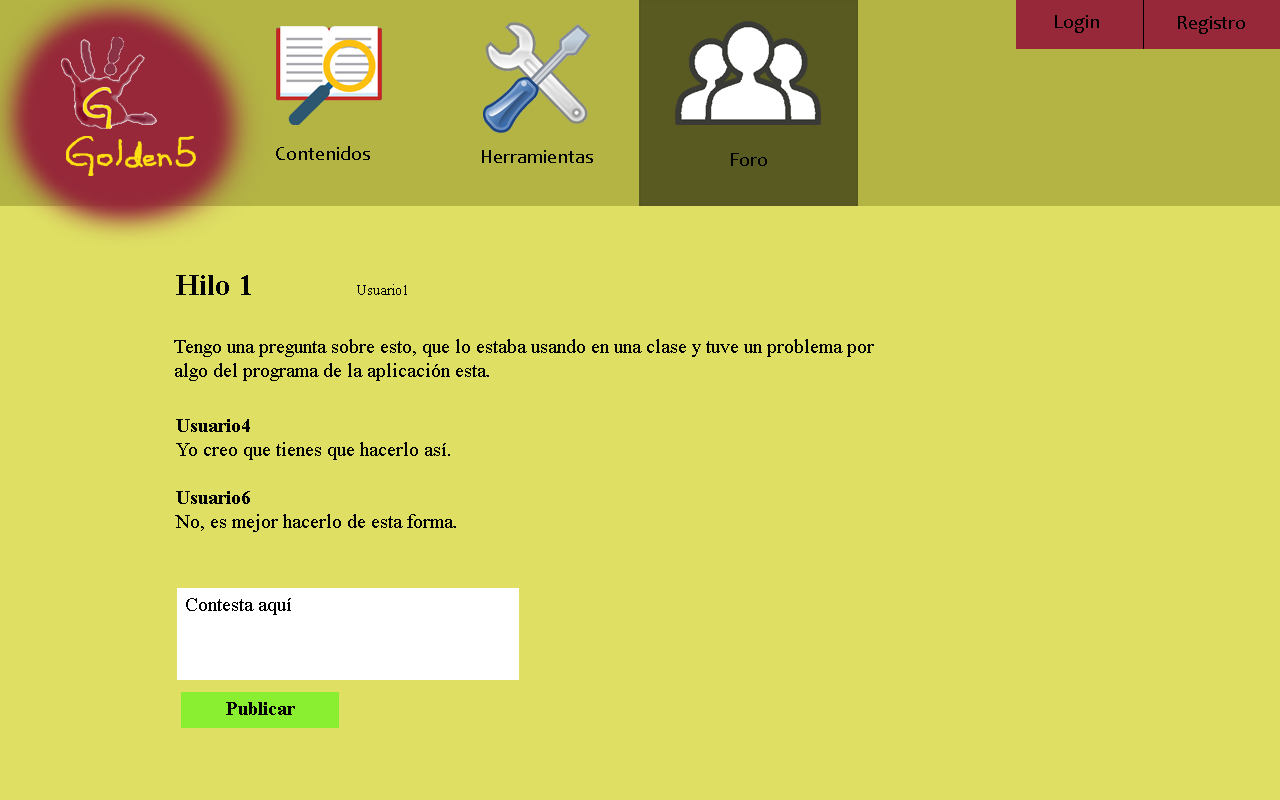
<style>
.page{position:relative;width:1280px;height:800px;background:#dedf63}
.page>*{position:absolute;margin:0}
.t1{font:20px "Candara";color:#000000}
.t2{font:15px "TimesNewRomanPSMT";color:#000000}
.t3{font:30px "TimesNewRomanPS-BoldMT";color:#000000}
.t4{font:20px "TimesNewRomanPSMT";color:#000000}
.t5{font:20px "TimesNewRomanPS-BoldMT";color:#000000}
</style>
<div class="page">
<p class="t1" style="left:1055px;top:15px;width:44px;height:18px">Login</p>
<p class="t1" style="left:1178px;top:16px;width:67px;height:18px">Registro</p>
<p class="t1" style="left:276px;top:146px;width:94px;height:14px">Contenidos</p>
<p class="t1" style="left:482px;top:150px;width:111px;height:13px">Herramientas</p>
<p class="t1" style="left:731px;top:153px;width:36px;height:13px">Foro</p>
<p class="t2" style="left:176px;top:275px;width:231px;height:20px"><span class="t3">Hilo 1   </span>Usuario1</p>
<p class="t4" style="left:174px;top:339px;width:700px;height:42px">Tengo una pregunta sobre esto, que lo estaba usando en una clase y tuve un problema por <br>algo del programa de la aplicación esta.</p>
<p class="t4" style="left:175px;top:419px;width:281px;height:113px"><span class="t5">Usuario4<br></span>Yo creo que tienes que hacerlo así.<br><br><span class="t5">Usuario6<br></span>No, es mejor hacerlo de esta forma.</p>
<p class="t4" style="left:186px;top:598px;width:105px;height:17px">Contesta aquí</p>
<p class="t5" style="left:226px;top:702px;width:69px;height:13px">Publicar</p>
</div>
